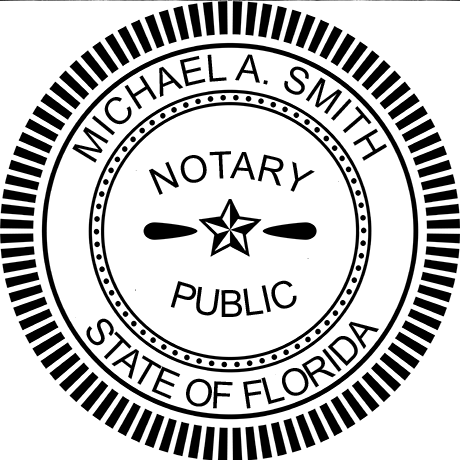
<style>
.page{position:relative;width:460px;height:460px;background:#ffffff}
.page>*{position:absolute;margin:0}
.t1{font:37.5px/24.9px "ArialMT";color:#000000}
.t2{font:37.5px "ArialMT";color:#000000}
</style>
<div class="page">
<p class="t1" style="left:72px;top:53px;width:315px;height:109px;text-align:center">MICHAEL A. SMITH</p>
<p class="t2" style="left:149px;top:150px;width:166px;height:44px">NOTARY</p>
<p class="t2" style="left:170px;top:279px;width:127px;height:37px">PUBLIC</p>
<p class="t1" style="left:86px;top:317px;width:293px;height:91px;text-align:center">STATE OF FLORIDA</p>
</div>
